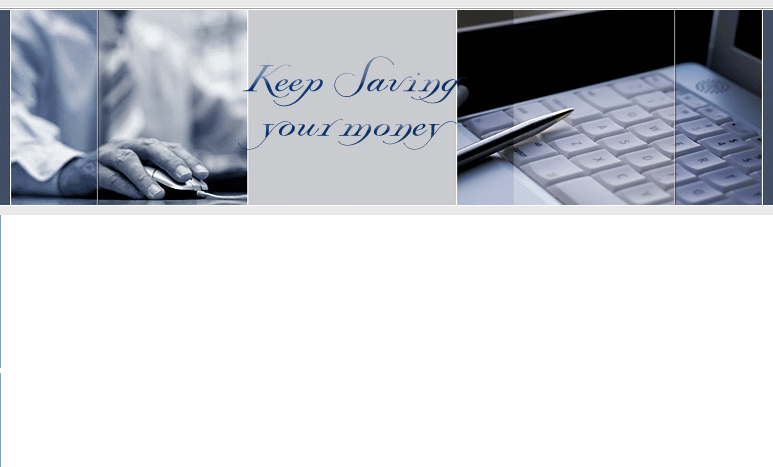
<style>
.page{position:relative;width:773px;height:467px;background:#ffffff}
.page>*{position:absolute;margin:0}
.t1{font:37px "Lysandria";color:#103870}
</style>
<div class="page">
<p class="t1" style="left:238px;top:56px;width:229px;height:94px;text-align:center">Keep Saving<br>your money</p>
</div>
